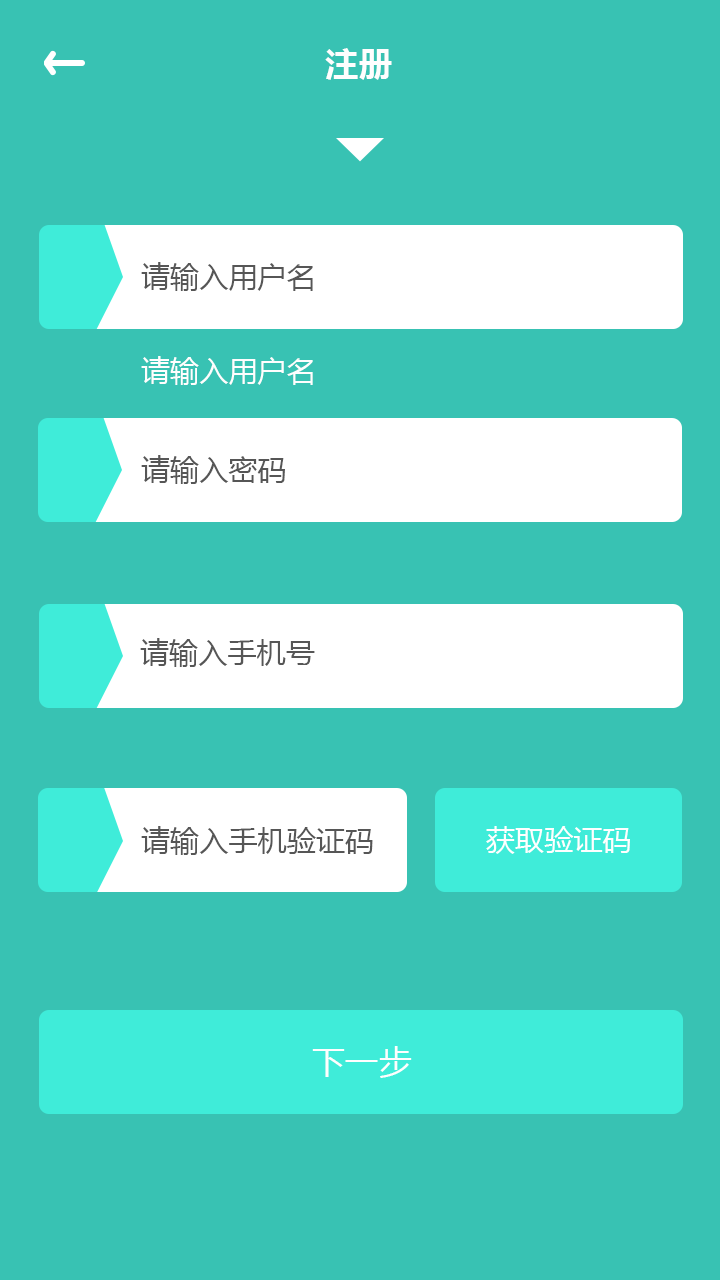
<style>
.page{position:relative;width:720px;height:1280px;background:#38c2b3}
.page>*{position:absolute;margin:0}
.t1{font:33.3px "MicrosoftYaHei-Bold";color:#fefefe}
.t2{font:29.2px "MicrosoftYaHei";color:#565656}
.t3{font:29.2px "MicrosoftYaHei";color:#fefefe}
.t4{font:29.2px "MicrosoftYaHei";color:#ffffff}
.t5{font:33.3px "MicrosoftYaHei";color:#fefefe}
</style>
<div class="page">
<p class="t1" style="left:325px;top:48px;width:67px;height:32px">注册</p>
<p class="t2" style="left:141px;top:262px;width:172px;height:29px">请输入用户名</p>
<p class="t3" style="left:141px;top:356px;width:172px;height:29px">请输入用户名</p>
<p class="t2" style="left:141px;top:455px;width:144px;height:29px">请输入密码</p>
<p class="t2" style="left:140px;top:638px;width:175px;height:29px">请输入手机号</p>
<p class="t2" style="left:141px;top:826px;width:232px;height:29px">请输入手机验证码</p>
<p class="t4" style="left:486px;top:826px;width:144px;height:28px">获取验证码</p>
<p class="t5" style="left:312px;top:1046px;width:100px;height:32px">下一步</p>
</div>
